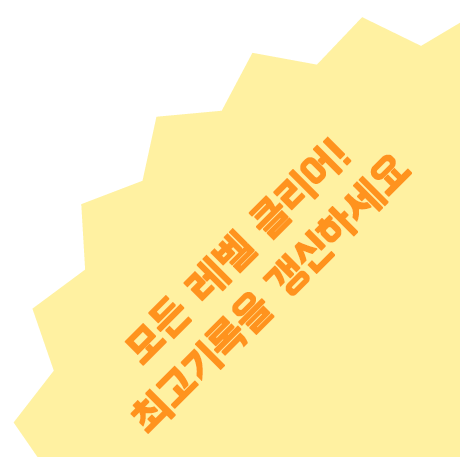
<style>
.page{position:relative;width:460px;height:457px;background:#fff1a1}
.page>*{position:absolute;margin:0}
.t1{font:43.2px/54.3px "BMHANNA11yrsold";letter-spacing:-0.04em;color:#ff931e;font-weight:bold}
</style>
<div class="page">
<p class="t1" style="left:124px;top:136px;width:288px;height:298px;text-align:center;rotate:-45deg">모든 레벨 클리어!<br>최고기록을 갱신하세요</p>
</div>
